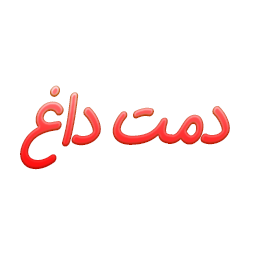
<style>
.page{position:relative;width:256px;height:256px;background:#ffffff}
.page>*{position:absolute;margin:0}
.t1{font:72.8px "IRANSansDNFaNum-Bold";letter-spacing:-0.06em;scale:0.84 1}
</style>
<div class="page">
<p class="t1" style="left:20px;top:85px;width:210px;height:85px">دمت داغ</p>
</div>
